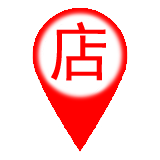
<style>
.page{position:relative;width:160px;height:160px;background:#ffffff}
.page>*{position:absolute;margin:0}
.t1{font:65px "SimHei";color:#ff0000}
</style>
<div class="page">
<p class="t1" style="left:51px;top:21px;width:55px;height:60px">店</p>
</div>
